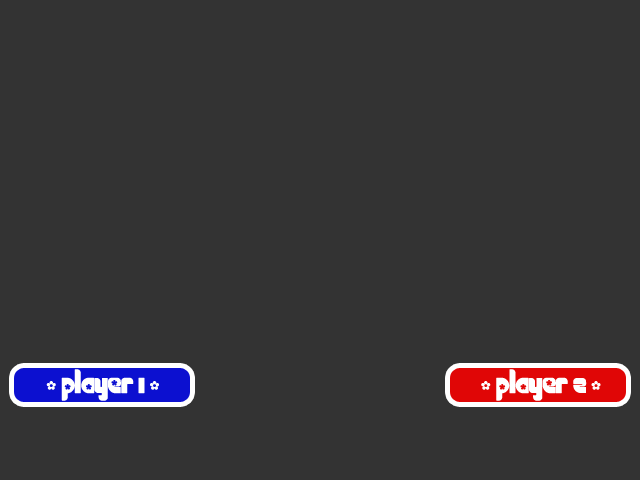
<style>
.page{position:relative;width:640px;height:480px;background:#333333}
.page>*{position:absolute;margin:0}
.t1{font:30px "Chick";color:#ffffff}
</style>
<div class="page">
<p class="t1" style="left:46px;top:369px;width:113px;height:32px">- player 1 -</p>
<p class="t1" style="left:481px;top:369px;width:120px;height:32px">- player 2 -</p>
</div>
